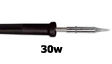
<style>
.page{position:relative;width:112px;height:64px;background:#ffffff}
.page>*{position:absolute;margin:0}
.t1{font:10px "Tahoma-Bold";color:#000000}
</style>
<div class="page">
<p class="t1" style="left:41px;top:45px;width:22px;height:8px">30w</p>
</div>
